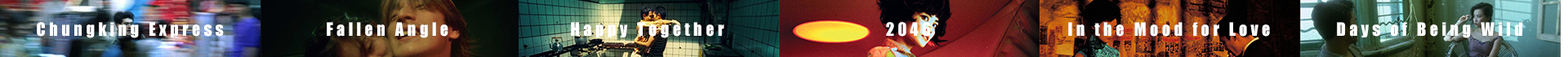
<style>
.page{position:relative;width:1568px;height:57px}
.page>*{position:absolute;margin:0}
.t1{font:17px "Impact";letter-spacing:0.2em;color:#ffffff}
</style>
<div class="page">
<p class="t1" style="left:37px;top:22px;width:187px;height:16px">Chungking Express</p>
<p class="t1" style="left:327px;top:22px;width:121px;height:16px">Fallen Angle</p>
<p class="t1" style="left:571px;top:22px;width:153px;height:16px">Happy Together</p>
<p class="t1" style="left:886px;top:22px;width:45px;height:15px">2046</p>
<p class="t1" style="left:1068px;top:22px;width:202px;height:15px">In the Mood for Love</p>
<p class="t1" style="left:1337px;top:22px;width:185px;height:16px">Days of Being Wild</p>
</div>
